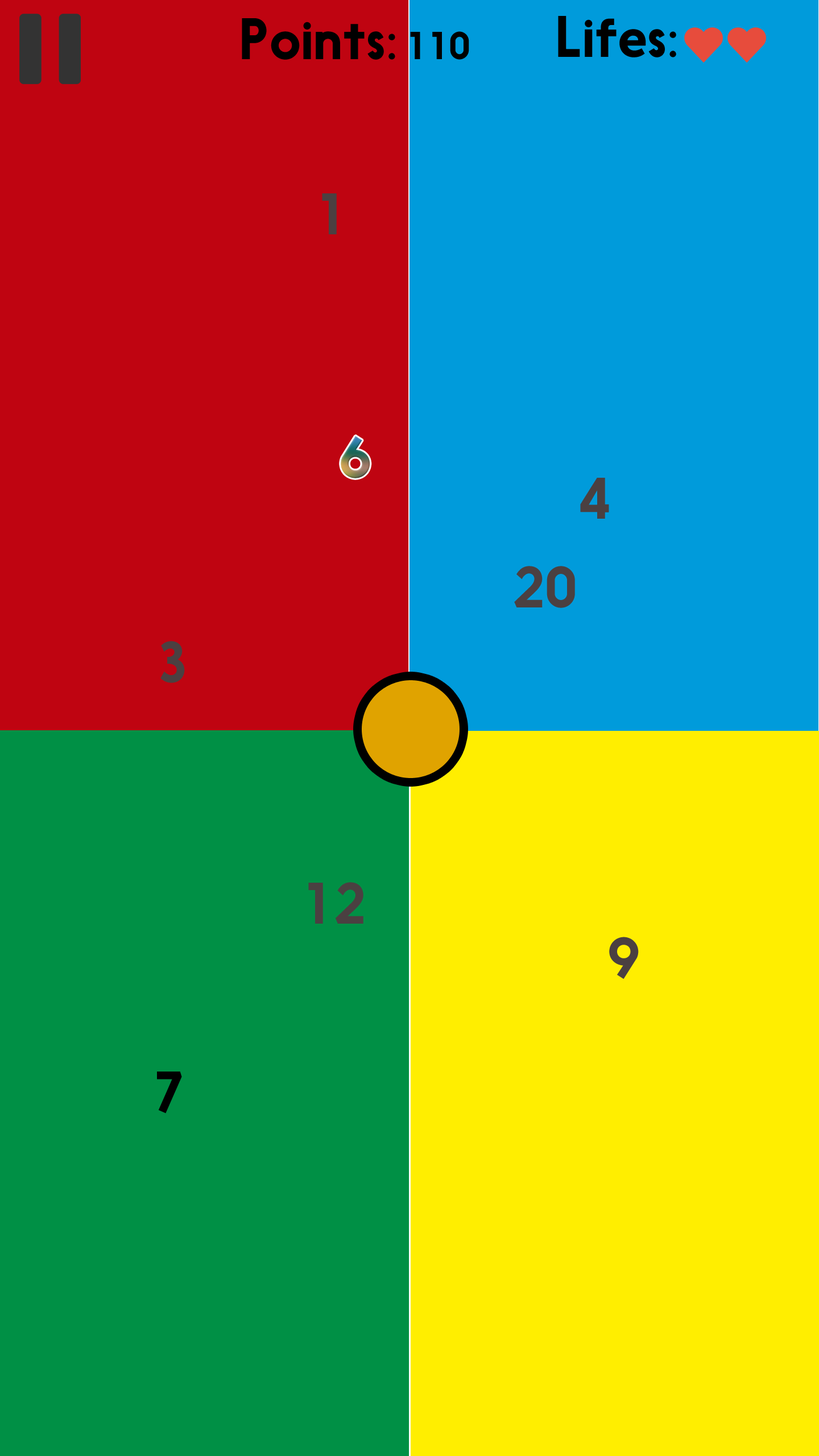
<style>
.page{position:relative;width:819px;height:1456px;background:#ffee00}
.page>*{position:absolute;margin:0}
.t1{font:54.6px "Nanami";color:#000000}
.t2{font:36.4px "Nanami";color:#000000}
.t3{font:54.6px "Nanami";color:#4b4041}
.t4{font:54.6px "Nanami"}
</style>
<div class="page">
<p class="t1" style="left:558px;top:16px;width:118px;height:41px">Lifes:</p>
<p class="t1" style="left:242px;top:18px;width:153px;height:42px">Points:</p>
<p class="t2" style="left:410px;top:31px;width:59px;height:29px">110</p>
<p class="t3" style="left:322px;top:193px;width:15px;height:41px">1</p>
<p class="t4" style="left:341px;top:436px;width:29px;height:42px">6</p>
<p class="t3" style="left:580px;top:478px;width:29px;height:41px">4</p>
<p class="t3" style="left:514px;top:566px;width:61px;height:42px">20</p>
<p class="t3" style="left:160px;top:641px;width:25px;height:42px">3</p>
<p class="t3" style="left:308px;top:882px;width:55px;height:42px">12</p>
<p class="t3" style="left:609px;top:937px;width:30px;height:42px">9</p>
<p class="t1" style="left:157px;top:1072px;width:25px;height:42px">7</p>
</div>
